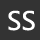
<style>
.page{position:relative;width:40px;height:40px;background:#333333}
.page>*{position:absolute;margin:0}
.t1{font:25px "MicrosoftYaHei";color:#ffffff}
</style>
<div class="page">
<p class="t1" style="left:8px;top:10px;width:27px;height:21px">SS</p>
</div>
